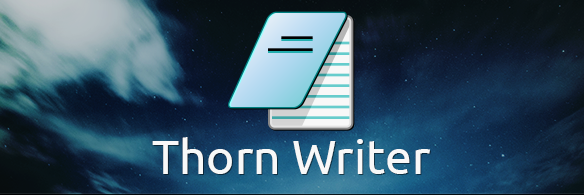
<style>
.page{position:relative;width:584px;height:195px}
.page>*{position:absolute;margin:0}
.t1{font:48px "Ubuntu";color:#f8f8f8}
</style>
<div class="page">
<p class="t1" style="left:152px;top:137px;width:278px;height:37px">Thorn Writer</p>
</div>
